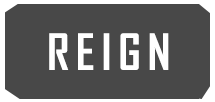
<style>
.page{position:relative;width:215px;height:102px;background:#484848}
.page>*{position:absolute;margin:0}
.t1{font:48px "AgencyFB-Bold";letter-spacing:0.14em;color:#ffffff}
</style>
<div class="page">
<p class="t1" style="left:49px;top:33px;width:120px;height:37px">REIGN</p>
</div>
